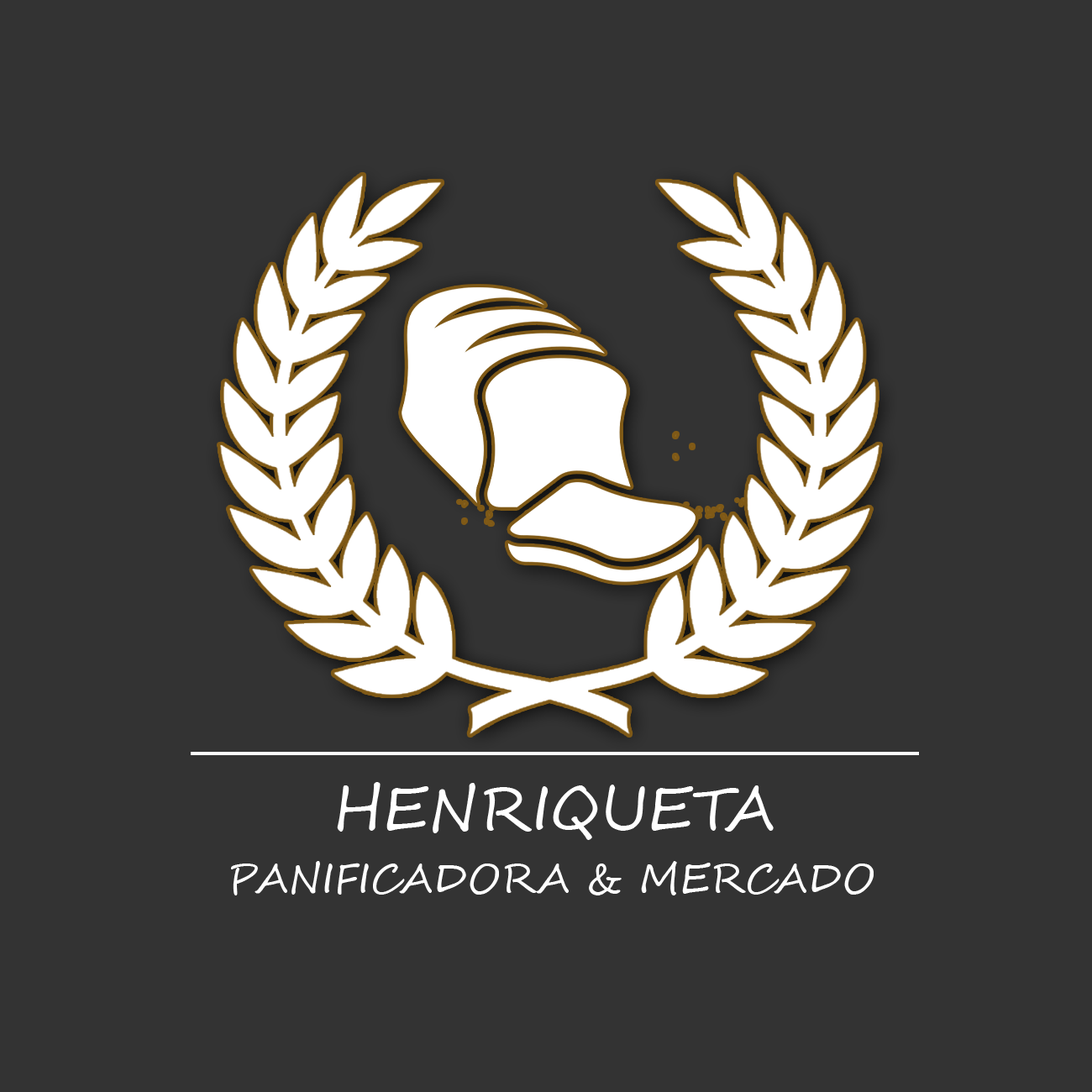
<style>
.page{position:relative;width:1092px;height:1092px;background:#333333}
.page>*{position:absolute;margin:0}
.t1{font:60.5px "SegoeScript";color:#ffffff}
.t2{font:40.3px "SegoeScript";color:#ffffff}
</style>
<div class="page">
<p class="t1" style="left:337px;top:782px;width:437px;height:58px">HENRIQUETA</p>
<p class="t2" style="left:231px;top:861px;width:643px;height:34px">PANIFICADORA &amp; MERCADO</p>
</div>
